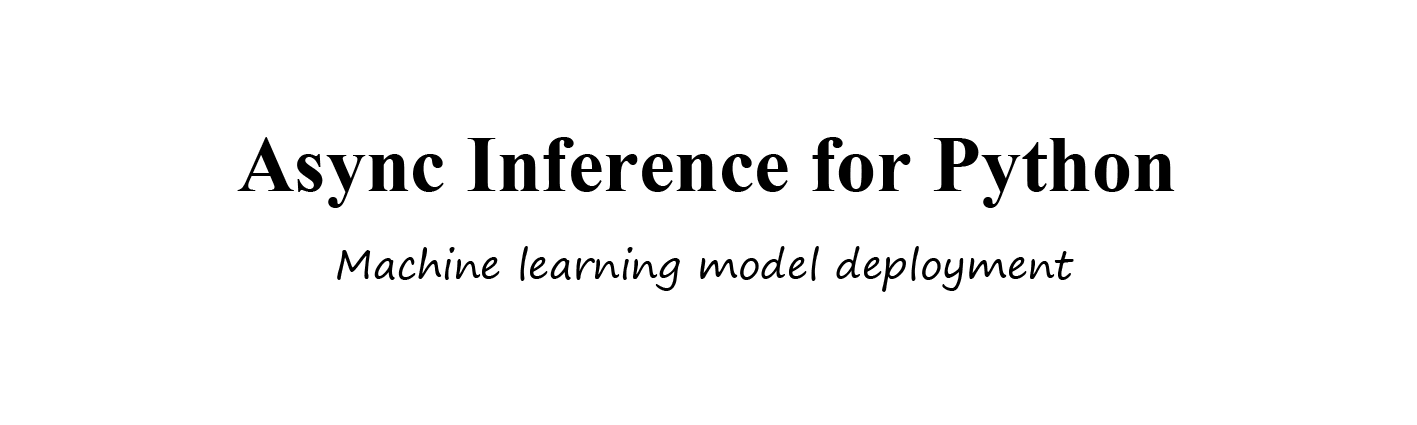
<style>
.page{position:relative;width:1417px;height:425px;background:#ffffff}
.page>*{position:absolute;margin:0}
.t1{font:80px "TimesNewRomanPS-BoldMT";color:#000000}
.t2{font:40px "SegoePrint";color:#000000}
</style>
<div class="page">
<p class="t1" style="left:237px;top:137px;width:938px;height:71px">Async Inference for Python</p>
<p class="t2" style="left:337px;top:246px;width:737px;height:46px">Machine learning model deployment</p>
</div>
